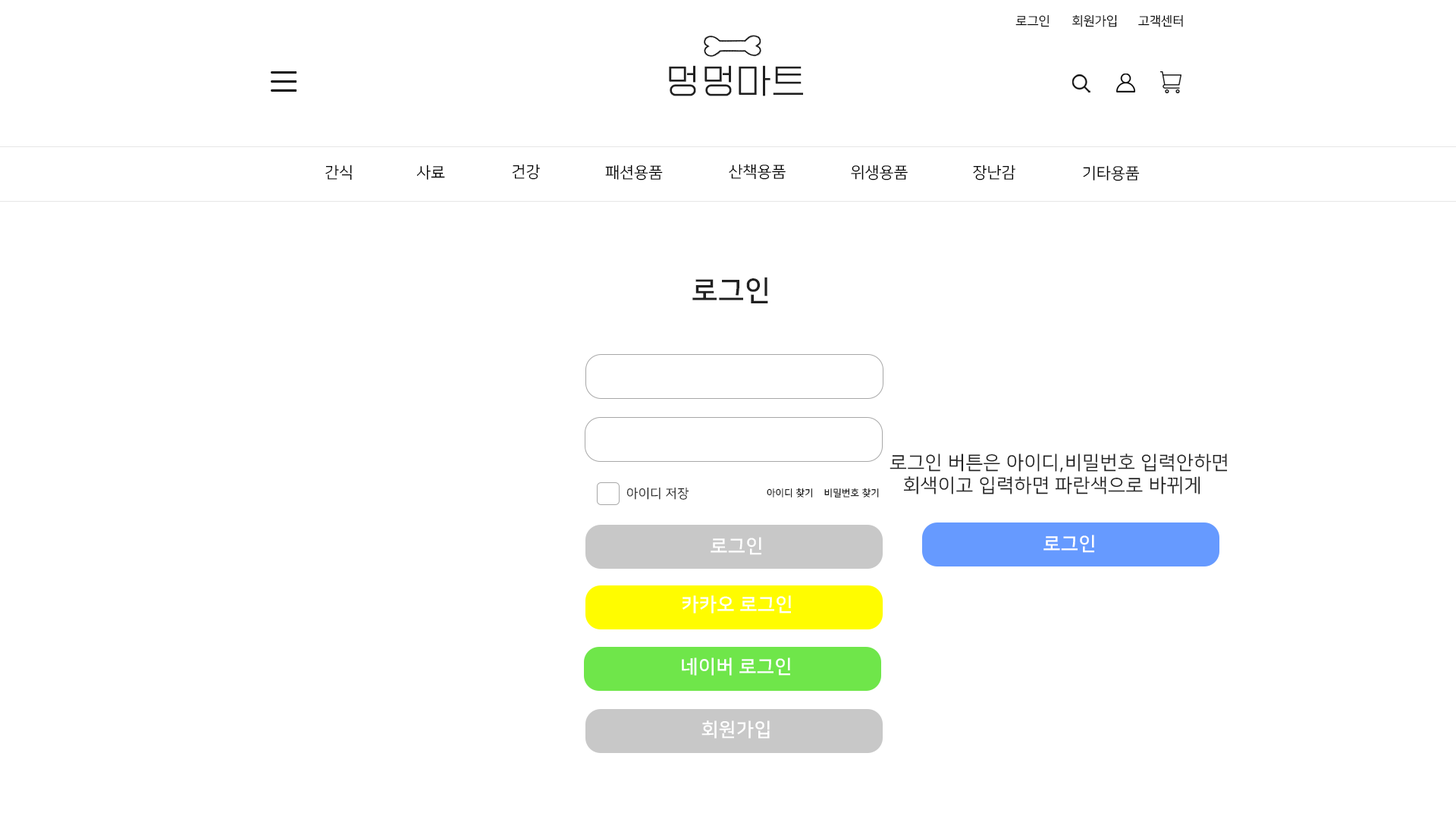
<style>
.page{position:relative;width:1456px;height:819px;background:#ffffff}
.page>*{position:absolute;margin:0}
.t1{font:12.6px "NanumSquareR";color:#000000}
.t2{font:34.8px "EF_watermelonSalad";letter-spacing:0.025em;color:#202020}
.t3{font:15.8px "NanumSquareR";color:#000000}
.t4{font:28.4px "NanumSquareB";letter-spacing:0.025em;color:#202020}
.t5{font:19px "NanumSquareR";letter-spacing:0.025em;color:#202020}
.t6{font:12.6px "NanumSquareR";letter-spacing:0.025em;color:#202020}
.t7{font:9.5px "NanumSquareR";letter-spacing:0.025em;color:#000000}
.t8{font:9.5px "NanumSquareR";letter-spacing:0.025em}
.t9{font:19px "NanumSquareB";letter-spacing:0.025em;color:#ffffff}
</style>
<div class="page">
<p class="t1" style="left:1015px;top:14px;width:35px;height:13px">로그인</p>
<p class="t1" style="left:1072px;top:14px;width:45px;height:13px">회원가입</p>
<p class="t1" style="left:1138px;top:14px;width:45px;height:13px">고객센터</p>
<p class="t2" style="left:669px;top:65px;width:134px;height:31px">멍멍마트</p>
<p class="t3" style="left:325px;top:165px;width:27px;height:15px">간식</p>
<p class="t3" style="left:416px;top:165px;width:29px;height:15px">사료</p>
<p class="t3" style="left:512px;top:164px;width:28px;height:16px">건강</p>
<p class="t3" style="left:605px;top:165px;width:58px;height:15px">패션용품</p>
<p class="t3" style="left:729px;top:164px;width:57px;height:16px">산책용품</p>
<p class="t3" style="left:851px;top:165px;width:57px;height:15px">위생용품</p>
<p class="t3" style="left:973px;top:165px;width:42px;height:15px">장난감</p>
<p class="t3" style="left:1083px;top:165px;width:57px;height:16px">기타용품</p>
<p class="t4" style="left:692px;top:277px;width:76px;height:26px">로그인</p>
<p class="t5" style="left:890px;top:453px;width:338px;height:41px;text-align:center">로그인 버튼은 아이디,비밀번호 입력안하면 <br>회색이고 입력하면 파란색으로 바뀌게</p>
<p class="t6" style="left:626px;top:487px;width:63px;height:13px">아이디 저장</p>
<p class="t7" style="left:767px;top:488px;width:45px;height:9px">아이디 찾기</p>
<p class="t8" style="left:824px;top:488px;width:55px;height:9px">비밀번호 찾기</p>
<p class="t9" style="left:711px;top:537px;width:50px;height:18px">로그인</p>
<p class="t9" style="left:1043px;top:535px;width:51px;height:18px">로그인</p>
<p class="t9" style="left:682px;top:595px;width:109px;height:18px">카카오 로그인</p>
<p class="t9" style="left:682px;top:657px;width:108px;height:19px">네이버 로그인</p>
<p class="t9" style="left:701px;top:720px;width:69px;height:19px">회원가입</p>
</div>
